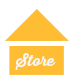
<style>
.page{position:relative;width:75px;height:75px;background:#ffffff}
.page>*{position:absolute;margin:0}
.t1{font:15.3px "ThirstyScript-Bold";color:#f6f6f6}
</style>
<div class="page">
<p class="t1" style="left:15px;top:53px;width:41px;height:17px">Store</p>
</div>
